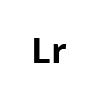
<style>
.page{position:relative;width:100px;height:100px;background:#ffffff}
.page>*{position:absolute;margin:0}
.t1{font:35px "OpenSans-Bold";color:#000000}
</style>
<div class="page">
<p class="t1" style="left:34px;top:38px;width:33px;height:25px">Lr</p>
</div>
